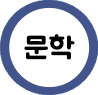
<style>
.page{position:relative;width:98px;height:95px;background:#ffffff}
.page>*{position:absolute;margin:0}
.t1{font:30px "BMJUA";color:#000000}
</style>
<div class="page">
<p class="t1" style="left:24px;top:34px;width:51px;height:26px">문학</p>
</div>
